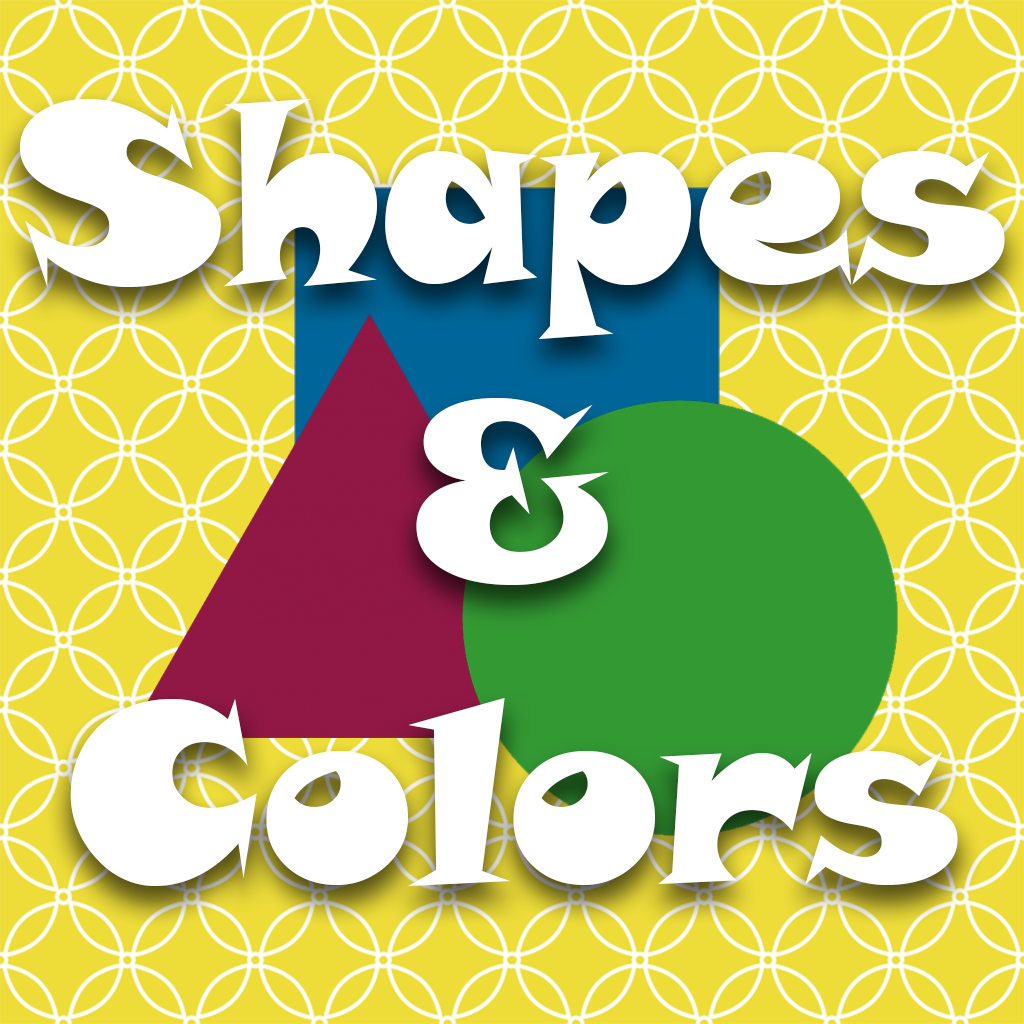
<style>
.page{position:relative;width:1024px;height:1024px;background:#ffffff}
.page>*{position:absolute;margin:0}
.t1{font:250px "SnapITC-Regular";color:#ffffff}
</style>
<div class="page">
<p class="t1" style="left:19px;top:99px;width:986px;height:787px;text-align:center">Shapes<br>&amp;<br>Colors</p>
</div>
